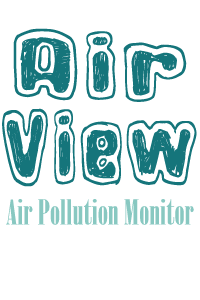
<style>
.page{position:relative;width:200px;height:300px;background:#ffffff}
.page>*{position:absolute;margin:0}
.t1{font:95.9px "Unionsoap";color:#15757b;scale:0.96 1}
.t2{font:104.7px "Unionsoap";color:#15757b;scale:0.63 1}
.t3{font:34.3px "BodoniMTPosterCompressed";color:#88c8c1;scale:1.08 1}
</style>
<div class="page">
<p class="t1" style="left:13px;top:28px;width:174px;height:74px;rotate:2deg">Air</p>
<p class="t2" style="left:2px;top:108px;width:195px;height:79px;rotate:-1deg">View</p>
<p class="t3" style="left:6px;top:199px;width:188px;height:26px">Air Pollution Monitor</p>
</div>
